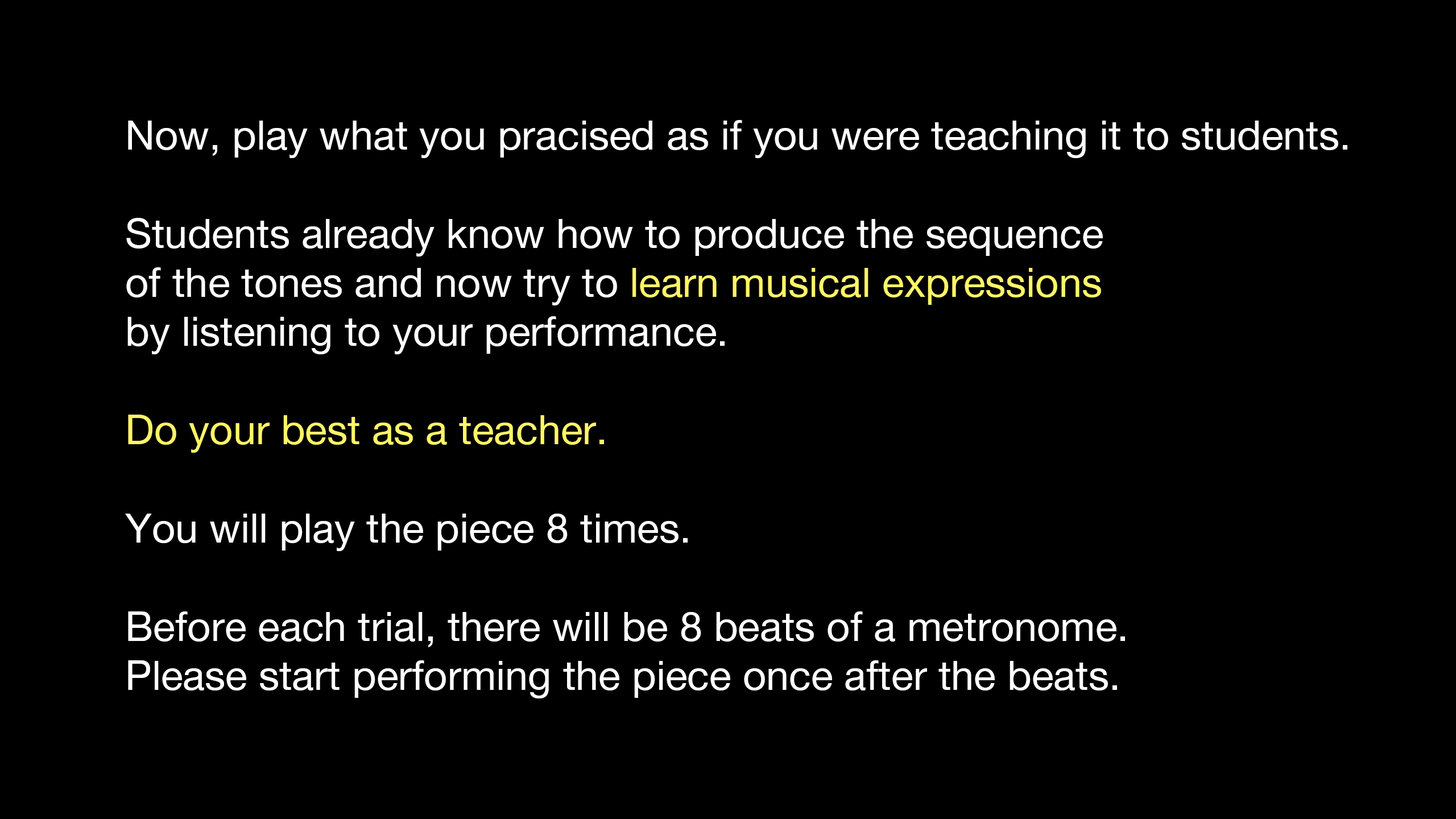
<style>
.page{position:relative;width:1456px;height:819px;background:#000000}
.page>*{position:absolute;margin:0}
.t1{font:40.9px "HelveticaNeue";color:#ffffff}
.t2{font:40.9px "HelveticaNeue";color:#fff568}
</style>
<div class="page">
<p class="t1" style="left:125px;top:120px;width:1222px;height:578px">Now, play what you pracised as if you were teaching it to students.<br><br>Students already know how to produce the sequence<br>of the tones and now try to <span class="t2">learn musical expressions<br></span>by listening to your performance.<br><br><span class="t2">Do your best as a teacher.<br></span><br>You will play the piece 8 times.<br><br>Before each trial, there will be 8 beats of a metronome.<br>Please start performing the piece once after the beats.</p>
</div>
